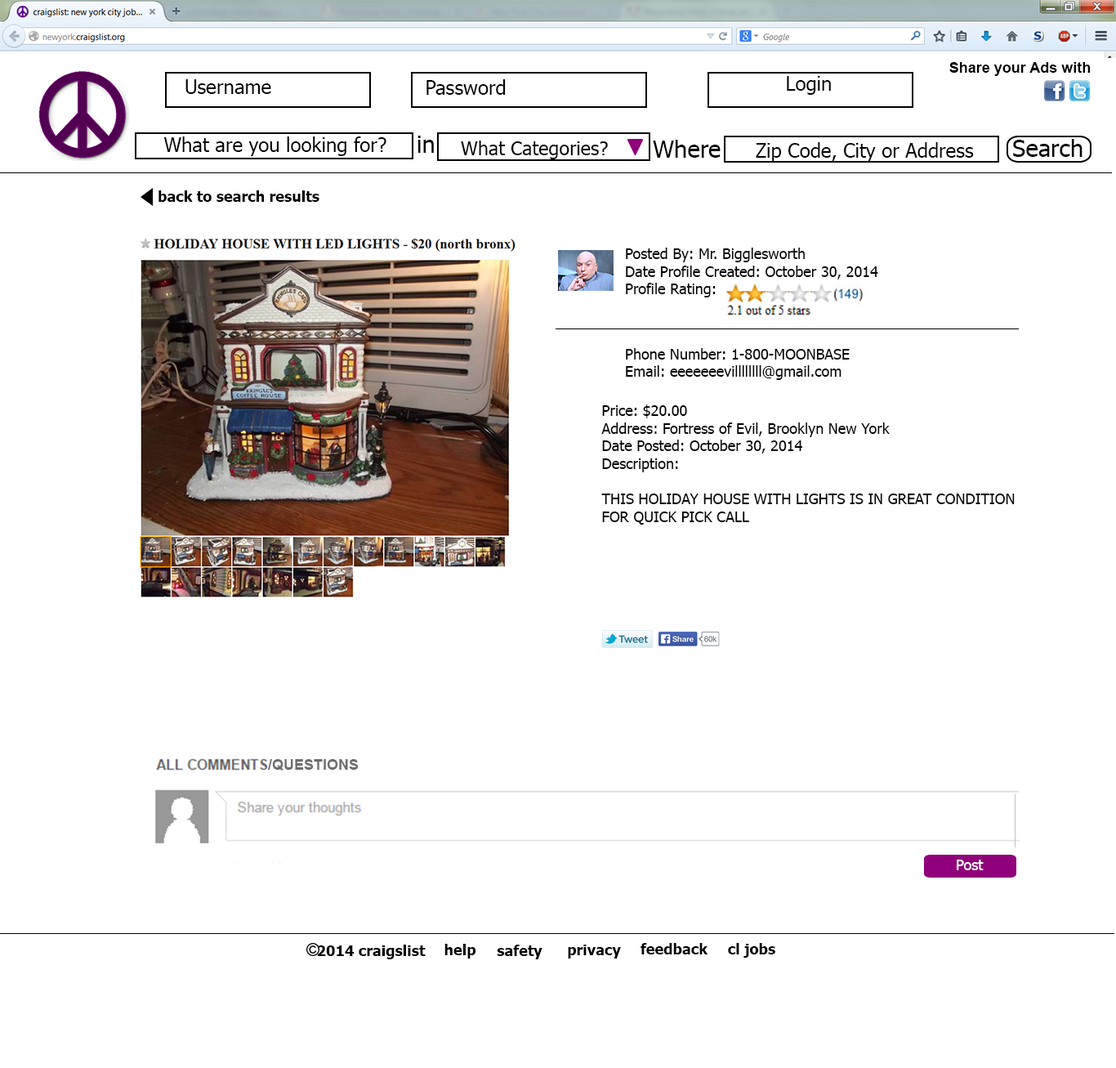
<style>
.page{position:relative;width:1116px;height:1068px;background:#ffffff}
.page>*{position:absolute;margin:0}
.t1{font:14.7px "Arial-BoldMT";color:#000000}
.t2{font:19.6px "Tahoma";color:#000000}
.t3{font:23.9px "Tahoma";color:#000000}
.t4{font:19.1px "Tahoma";color:#000000}
.t5{font:14.7px "Tahoma-Bold";color:#000000}
.t6{font:14.7px "Tahoma";color:#000000}
.t7{font:14.7px "Arial-BoldMT";color:#6e6e6e}
.t8{font:14.7px "Tahoma";color:#ffffff}
</style>
<div class="page">
<p class="t1" style="left:950px;top:62px;width:140px;height:14px">Share your Ads with</p>
<p class="t2" style="left:787px;top:76px;width:44px;height:19px">Login</p>
<p class="t2" style="left:186px;top:79px;width:85px;height:15px">Username</p>
<p class="t2" style="left:427px;top:79px;width:79px;height:16px">Password</p>
<p class="t2" style="left:163px;top:136px;width:224px;height:20px">What are you looking for?</p>
<p class="t3" style="left:418px;top:136px;width:16px;height:17px">in</p>
<p class="t4" style="left:461px;top:141px;width:147px;height:18px">What Categories?</p>
<p class="t3" style="left:653px;top:140px;width:68px;height:18px">Where</p>
<p class="t2" style="left:756px;top:142px;width:218px;height:20px">Zip Code, City or Address</p>
<p class="t3" style="left:1013px;top:139px;width:70px;height:18px">Search</p>
<p class="t5" style="left:159px;top:190px;width:161px;height:12px">back to search results</p>
<p class="t6" style="left:626px;top:248px;width:253px;height:49px">Posted By: Mr. Bigglesworth<br>Date Profile Created: October 30, 2014<br>Profile Rating:</p>
<p class="t6" style="left:626px;top:348px;width:224px;height:32px">Phone Number: 1-800-MOONBASE<br>Email: eeeeeeevillllllll@gmail.com</p>
<p class="t6" style="left:601px;top:405px;width:414px;height:120px">Price: $20.00<br>Address: Fortress of Evil, Brooklyn New York<br>Date Posted: October 30, 2014<br>Description: <br><br>THIS HOLIDAY HOUSE WITH LIGHTS IS IN GREAT CONDITION<br>FOR QUICK PICK CALL</p>
<p class="t7" style="left:268px;top:759px;width:91px;height:12px">/QUESTIONS</p>
<p class="t8" style="left:957px;top:860px;width:27px;height:10px">Post</p>
<p class="t5" style="left:317px;top:945px;width:109px;height:14px">2014 craigslist</p>
<p class="t5" style="left:445px;top:944px;width:31px;height:15px">help</p>
<p class="t5" style="left:497px;top:945px;width:46px;height:14px">safety</p>
<p class="t5" style="left:568px;top:945px;width:53px;height:14px">privacy</p>
<p class="t5" style="left:641px;top:943px;width:68px;height:12px">feedback</p>
<p class="t5" style="left:728px;top:943px;width:48px;height:15px">cl jobs</p>
</div>
